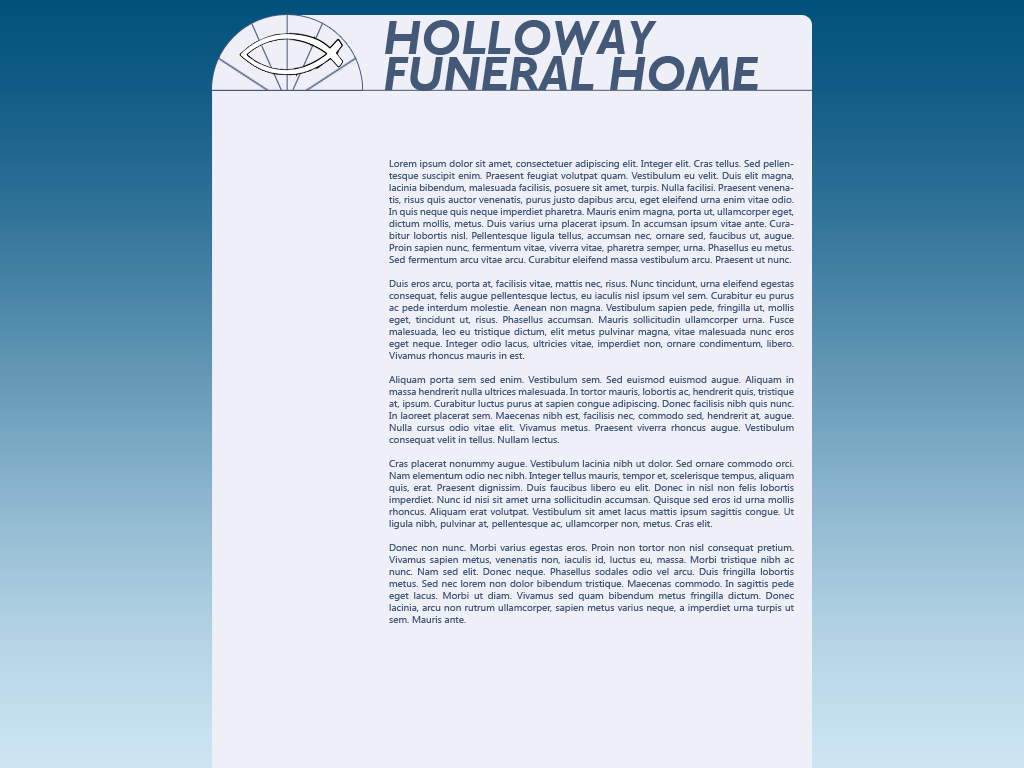
<style>
.page{position:relative;width:1024px;height:768px;background:#eeeff7}
.page>*{position:absolute;margin:0}
.t1{font:48px/36px "GillSansMT-BoldItalic";color:#445878}
.t2{font:10px "SegoeUI";color:#445878}
</style>
<div class="page">
<p class="t1" style="left:384px;top:20px;width:375px;height:71px">HOLLOWAY<br>FUNERAL HOME</p>
<p class="t2" style="left:389px;top:160px;width:405px;height:463px;text-align:justify">Lorem ipsum dolor sit amet, consectetuer adipiscing elit. Integer elit. Cras tellus. Sed pellentesque suscipit enim. Praesent feugiat volutpat quam. Vestibulum eu velit. Duis elit magna, lacinia bibendum, malesuada facilisis, posuere sit amet, turpis. Nulla facilisi. Praesent venenatis, risus quis auctor venenatis, purus justo dapibus arcu, eget eleifend urna enim vitae odio. In quis neque quis neque imperdiet pharetra. Mauris enim magna, porta ut, ullamcorper eget, dictum mollis, metus. Duis varius urna placerat ipsum. In accumsan ipsum vitae ante. Curabitur lobortis nisl. Pellentesque ligula tellus, accumsan nec, ornare sed, faucibus ut, augue. Proin sapien nunc, fermentum vitae, viverra vitae, pharetra semper, urna. Phasellus eu metus. Sed fermentum arcu vitae arcu. Curabitur eleifend massa vestibulum arcu. Praesent ut nunc.<br><br>Duis eros arcu, porta at, facilisis vitae, mattis nec, risus. Nunc tincidunt, urna eleifend egestas consequat, felis augue pellentesque lectus, eu iaculis nisl ipsum vel sem. Curabitur eu purus ac pede interdum molestie. Aenean non magna. Vestibulum sapien pede, fringilla ut, mollis eget, tincidunt ut, risus. Phasellus accumsan. Mauris sollicitudin ullamcorper urna. Fusce malesuada, leo eu tristique dictum, elit metus pulvinar magna, vitae malesuada nunc eros eget neque. Integer odio lacus, ultricies vitae, imperdiet non, ornare condimentum, libero. Vivamus rhoncus mauris in est.<br><br>Aliquam porta sem sed enim. Vestibulum sem. Sed euismod euismod augue. Aliquam in massa hendrerit nulla ultrices malesuada. In tortor mauris, lobortis ac, hendrerit quis, tristique at, ipsum. Curabitur luctus purus at sapien congue adipiscing. Donec facilisis nibh quis nunc. In laoreet placerat sem. Maecenas nibh est, facilisis nec, commodo sed, hendrerit at, augue. Nulla cursus odio vitae elit. Vivamus metus. Praesent viverra rhoncus augue. Vestibulum consequat velit in tellus. Nullam lectus.<br><br>Cras placerat nonummy augue. Vestibulum lacinia nibh ut dolor. Sed ornare commodo orci. Nam elementum odio nec nibh. Integer tellus mauris, tempor et, scelerisque tempus, aliquam quis, erat. Praesent dignissim. Duis faucibus libero eu elit. Donec in nisl non felis lobortis imperdiet. Nunc id nisi sit amet urna sollicitudin accumsan. Quisque sed eros id urna mollis rhoncus. Aliquam erat volutpat. Vestibulum sit amet lacus mattis ipsum sagittis congue. Ut ligula nibh, pulvinar at, pellentesque ac, ullamcorper non, metus. Cras elit.<br><br>Donec non nunc. Morbi varius egestas eros. Proin non tortor non nisl consequat pretium. Vivamus sapien metus, venenatis non, iaculis id, luctus eu, massa. Morbi tristique nibh ac nunc. Nam sed elit. Donec neque. Phasellus sodales odio vel arcu. Duis fringilla lobortis metus. Sed nec lorem non dolor bibendum tristique. Maecenas commodo. In sagittis pede eget lacus. Morbi ut diam. Vivamus sed quam bibendum metus fringilla dictum. Donec lacinia, arcu non rutrum ullamcorper, sapien metus varius neque, a imperdiet urna turpis ut sem. Mauris ante.</p>
</div>
